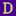
<style>
.page{position:relative;width:16px;height:16px;background:#4a0089}
.page>*{position:absolute;margin:0}
.t1{font:14px "Georgia";color:#d5d790}
</style>
<div class="page">
<p class="t1" style="left:3px;top:2px;width:10px;height:12px">D</p>
</div>
